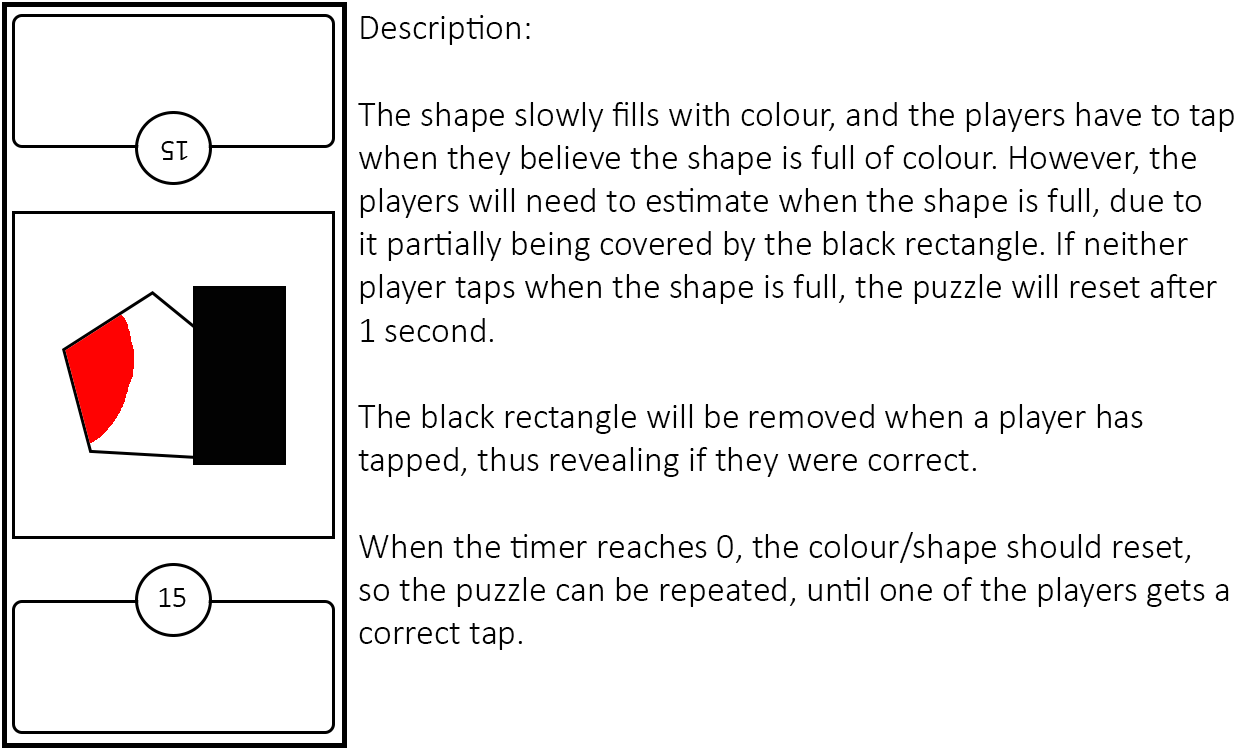
<style>
.page{position:relative;width:1250px;height:750px;background:#ffffff}
.page>*{position:absolute;margin:0}
.t1{font:36px "Calibri-Light";color:#020202}
</style>
<div class="page">
<p class="t1" style="left:358px;top:15px;width:876px;height:635px">Description:<br><br>The shape slowly fills with colour, and the players have to tap<br>when they believe the shape is full of colour. However, the<br>players will need to estimate when the shape is full, due to <br>it partially being covered by the black rectangle. If neither <br>player taps when the shape is full, the puzzle will reset after<br>1 second.<br><br>The black rectangle will be removed when a player has<br>tapped, thus revealing if they were correct.<br><br>When the timer reaches 0, the colour/shape should reset, <br>so the puzzle can be repeated, until one of the players gets a <br>correct tap.</p>
</div>
